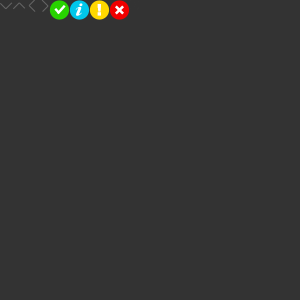
<style>
.page{position:relative;width:300px;height:300px;background:#333333}
.page>*{position:absolute;margin:0}
.t1{font:16px "Arial-Black";color:#ffffff;text-transform:uppercase}
</style>
<div class="page">
<p class="t1" style="left:97px;top:4px;width:4px;height:12px">!</p>
</div>
